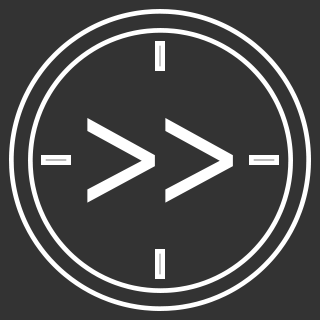
<style>
.page{position:relative;width:320px;height:320px;background:#333333}
.page>*{position:absolute;margin:0}
.t1{font:150px "AcuminConcept-Regular";letter-spacing:-0.1em;color:#ffffff}
</style>
<div class="page">
<p class="t1" style="left:87px;top:118px;width:146px;height:85px">&gt;&gt;</p>
</div>
